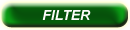
<style>
.page{position:relative;width:130px;height:30px}
.page>*{position:absolute;margin:0}
.t1{font:14px "Arial-BoldItalicMT";color:#fcfbf9}
</style>
<div class="page">
<p class="t1" style="left:42px;top:10px;width:49px;height:10px">FILTER</p>
</div>
